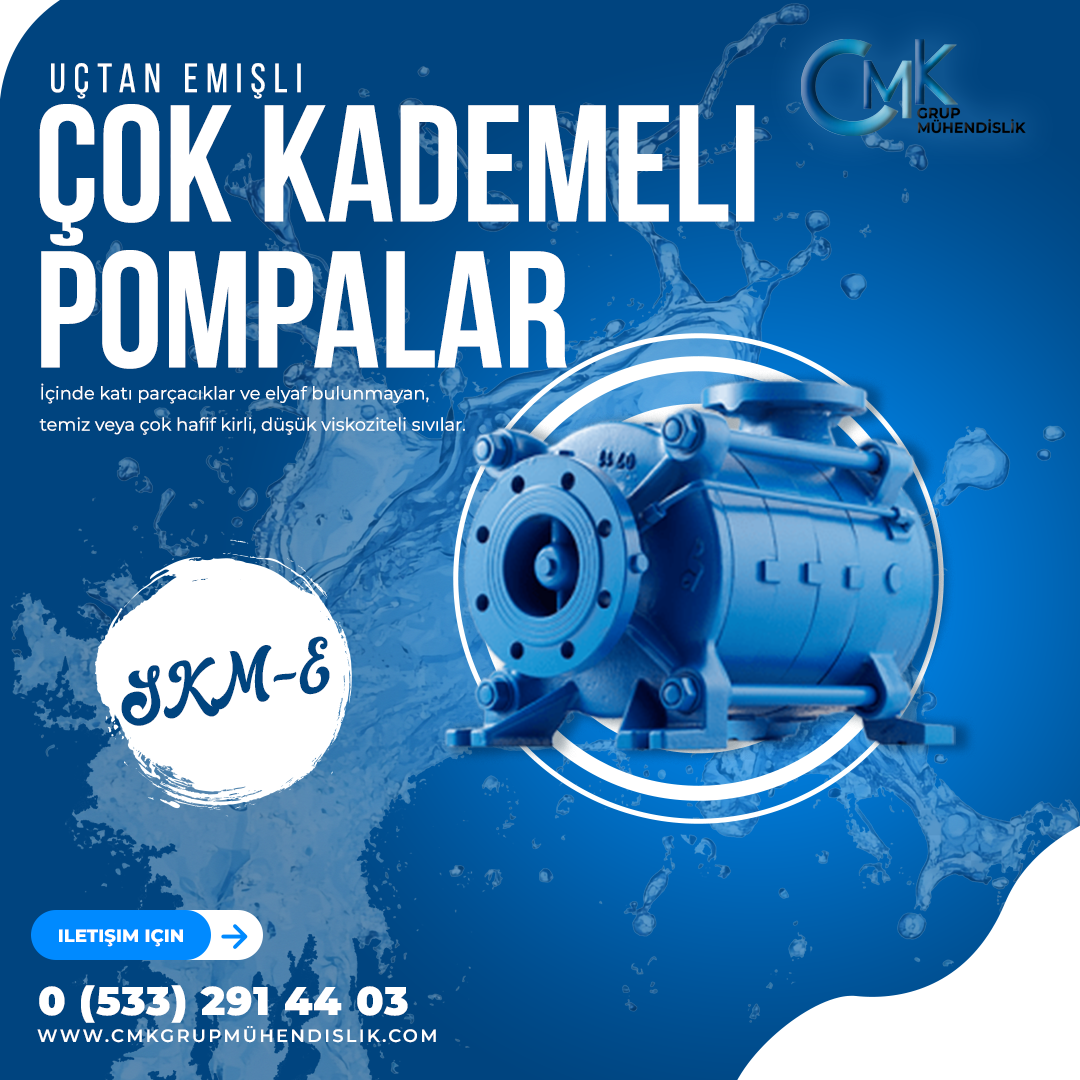
<style>
.page{position:relative;width:1080px;height:1080px}
.page>*{position:absolute;margin:0}
.t1{font:40.8px "BebasNeueRegular";letter-spacing:0.2em;color:#ffffff}
.t2{font:165.6px "BebasNeueBold";color:#ffffff}
.t3{font:17.9px "Montserrat-Regular";color:#ffffff}
.t4{font:58.3px "RetrowMentho";color:#00447f}
.t5{font:18px "Montserrat-ExtraBold";color:#ffffff;text-transform:uppercase}
.t6{font:39.9px "Montserrat-Black";letter-spacing:0.025em;color:#ffffff}
.t7{font:18px "Montserrat-SemiBold";letter-spacing:0.12em;color:#ffffff;text-transform:uppercase}
</style>
<div class="page">
<p class="t1" style="left:51px;top:63px;width:250px;height:36px">Uçtan Emişli</p>
<p class="t2" style="left:39px;top:104px;width:716px;height:142px">çok kademeli</p>
<p class="t2" style="left:41px;top:250px;width:526px;height:119px">pompalar</p>
<p class="t3" style="left:39px;top:383px;width:426px;height:52px">İçinde katı parçacıklar ve elyaf bulunmayan, temiz veya çok hafif kirli, düşük viskoziteli sıvılar.</p>
<p class="t4" style="left:121px;top:636px;width:209px;height:90px;rotate:-10deg">SKM-E</p>
<p class="t5" style="left:59px;top:929px;width:124px;height:18px">iletişim için</p>
<p class="t6" style="left:39px;top:985px;width:369px;height:38px">0 (533) 291 44 03</p>
<p class="t7" style="left:37px;top:1026px;width:399px;height:17px">www.cmkgrupmühendislik.com</p>
</div>
